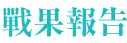
<style>
.page{position:relative;width:127px;height:43px;background:#ffffff}
.page>*{position:absolute;margin:0}
.t1{font:32px "RyuminPr6N-ExBold";color:#1dbcbf}
</style>
<div class="page">
<p class="t1" style="left:2px;top:7px;width:126px;height:30px">戰果報告</p>
</div>
